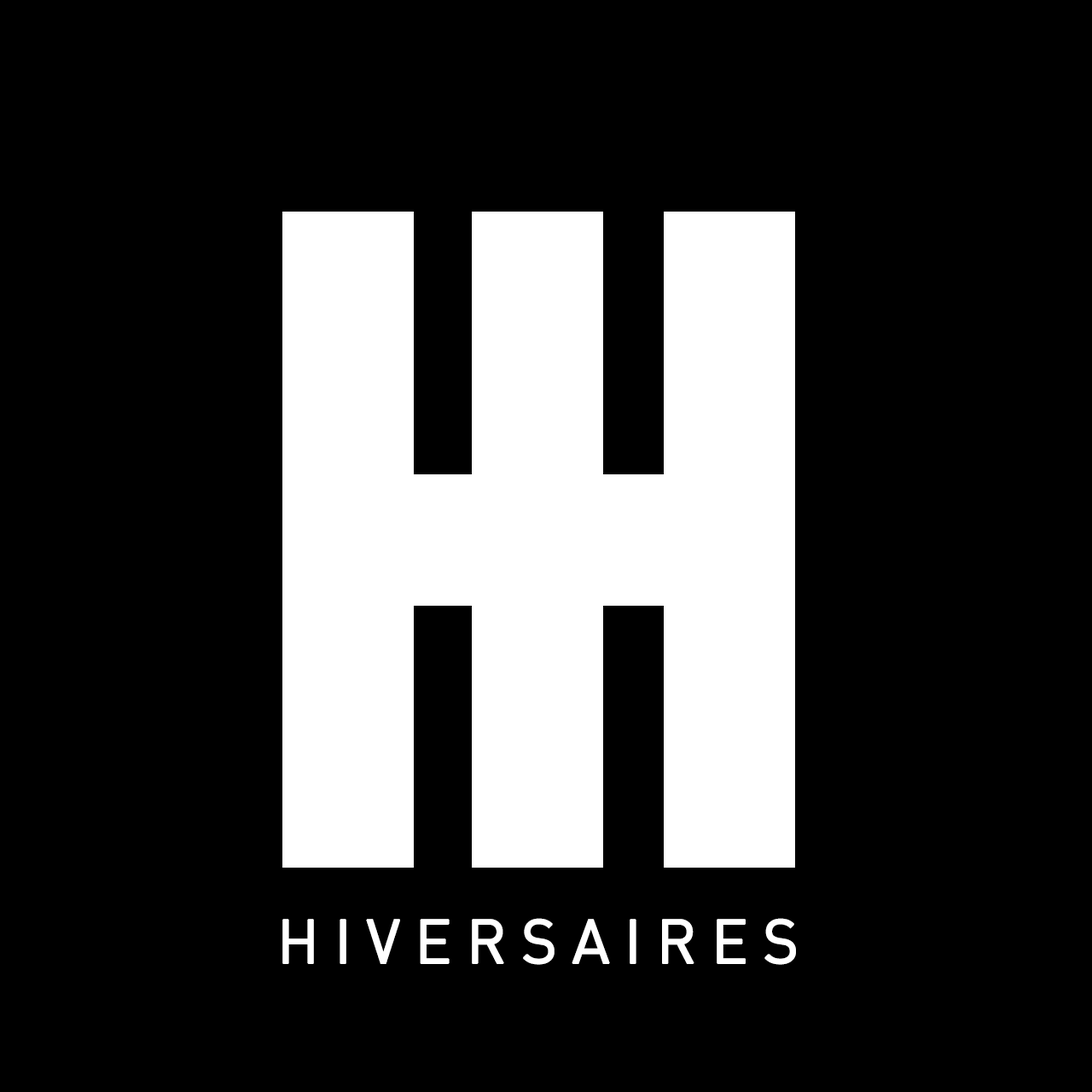
<style>
.page{position:relative;width:1092px;height:1092px;background:#000000}
.page>*{position:absolute;margin:0}
.t1{font:60.7px "DIN-Regular";letter-spacing:0.22em;color:#ffffff;font-weight:bold}
</style>
<div class="page">
<p class="t1" style="left:282px;top:918px;width:514px;height:47px">HIVERSAIRES</p>
</div>
